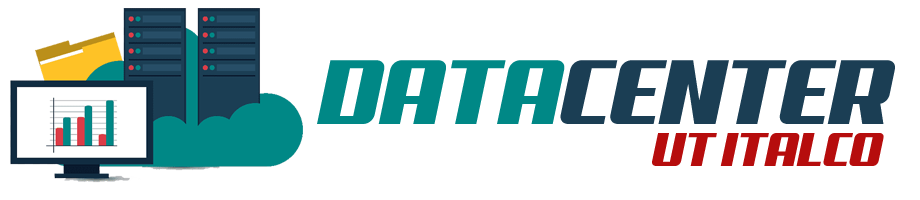
<style>
.page{position:relative;width:920px;height:200px;background:#ffffff}
.page>*{position:absolute;margin:0}
.t1{font:92.4px "Aero";letter-spacing:-0.02em;color:#1b3e54}
.t2{font:92.4px "Aero";letter-spacing:-0.02em;color:#008886}
.t3{font:48px "Aero";letter-spacing:-0.02em;color:#b60d0d}
</style>
<div class="page">
<p class="t1" style="left:317px;top:60px;width:578px;height:64px"><span class="t2">DATA</span>CENTER</p>
<p class="t3" style="left:652px;top:133px;width:232px;height:33px">UT ITALCO</p>
</div>
